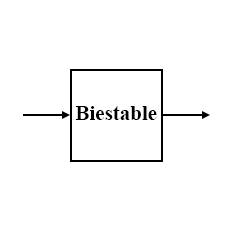
<style>
.page{position:relative;width:232px;height:232px;background:#ffffff}
.page>*{position:absolute;margin:0}
.t1{font:21px "TimesNewRomanPS-BoldMT";color:#000000}
</style>
<div class="page">
<p class="t1" style="left:75px;top:106px;width:82px;height:14px">Biestable</p>
</div>
